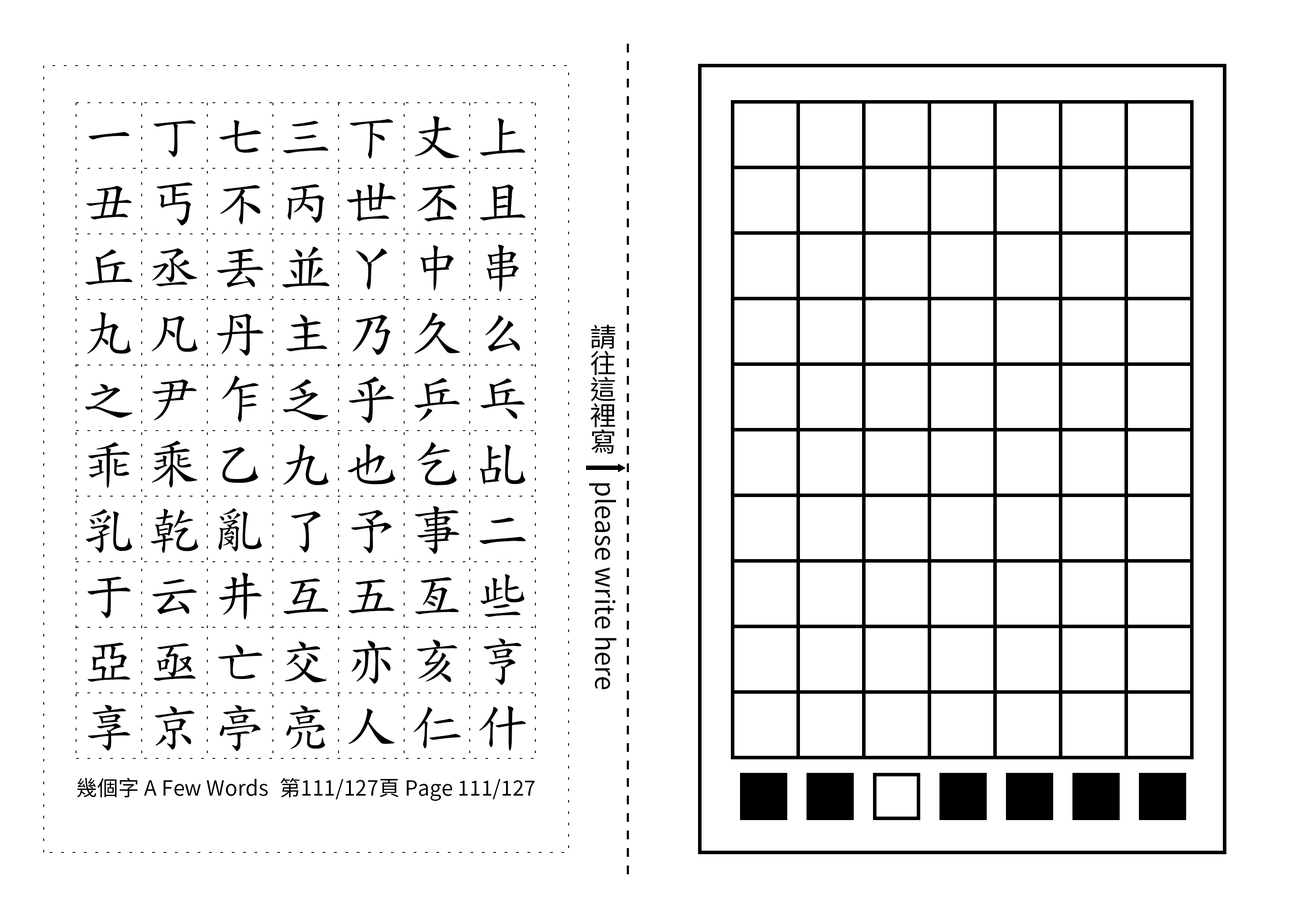
<style>
.page{position:relative;width:1299px;height:918px;background:#ffffff}
.page>*{position:absolute;margin:0}
.t1{font:52.5px/65.6px "TW-Kai-98_1";letter-spacing:0.25em;color:#000000}
.t2{font:26.2px "SourceHanSansTC-Regular";color:#000000}
.t3{font:21px "SourceHanSansTC-Regular";color:#000000}
</style>
<div class="page">
<p class="t1" style="left:85px;top:116px;width:441px;height:636px;text-align:center">一丁七三下丈上丑丐不丙世丕且丘丞丟並丫中串丸凡丹主乃久么之尹乍乏乎乒乓乖乘乙九也乞乩乳乾亂了予事二于云井互五亙些亞亟亡交亦亥亨享京亭亮人仁什</p>
<p class="t2" style="left:589px;top:324px;width:28px;height:366px;text-align:center">請往這裡寫　please write here</p>
<p class="t3" style="left:77px;top:778px;width:191px;height:20px">幾個字 A Few Words</p>
<p class="t3" style="left:280px;top:778px;width:255px;height:23px">第111/127頁 Page 111/127</p>
</div>
